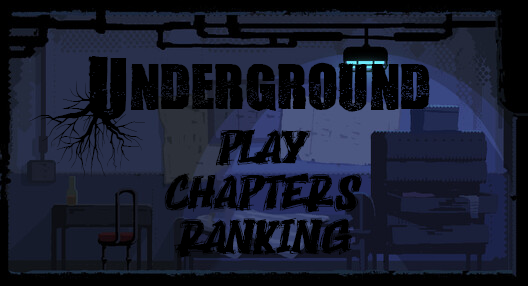
<style>
.page{position:relative;width:528px;height:286px;background:#000000}
.page>*{position:absolute;margin:0}
.t1{font:74px "Aokigahara";color:#000000}
.t2{font:44px "DarkMage";color:#000000}
</style>
<div class="page">
<p class="t1" style="left:29px;top:56px;width:401px;height:124px">Underground</p>
<p class="t2" style="left:215px;top:129px;width:96px;height:37px">Play</p>
<p class="t2" style="left:164px;top:173px;width:198px;height:40px">chapters</p>
<p class="t2" style="left:173px;top:218px;width:180px;height:40px">ranking</p>
</div>
